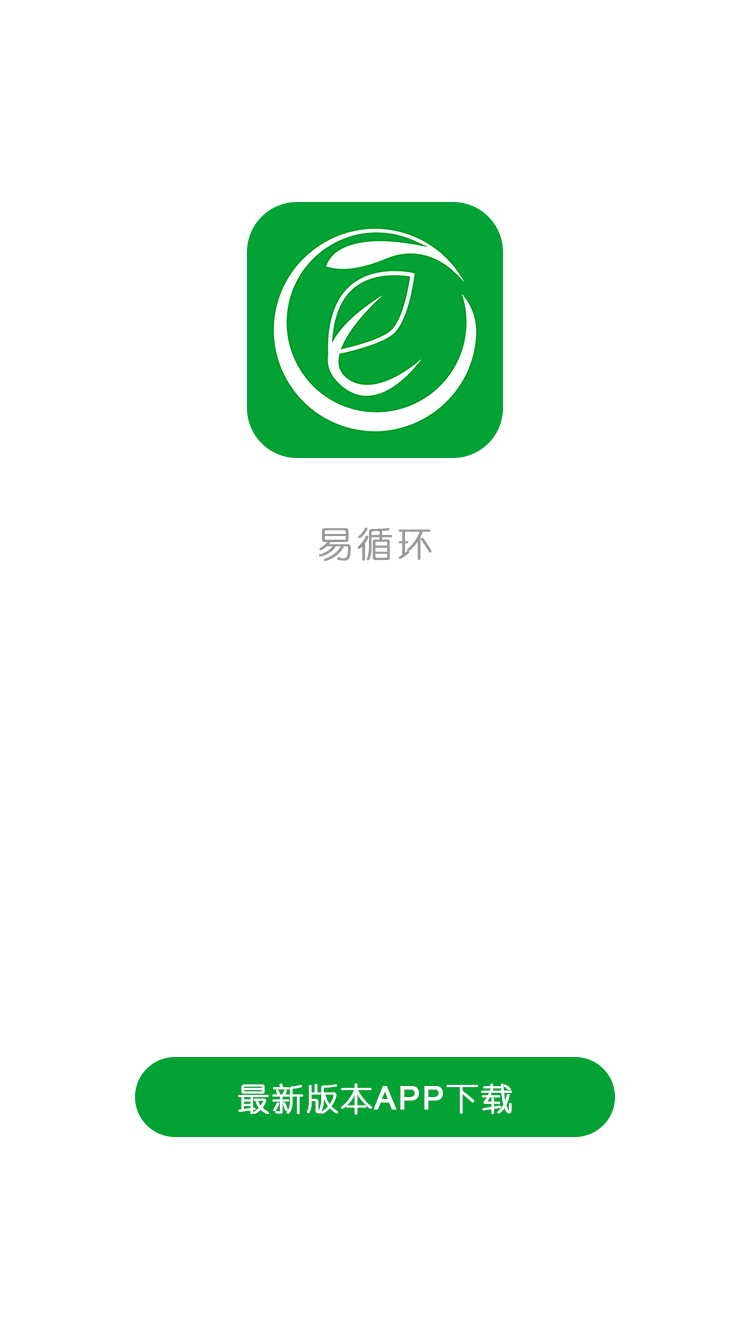
<style>
.page{position:relative;width:750px;height:1335px;background:#ffffff}
.page>*{position:absolute;margin:0}
.t1{font:35.4px "YouYuan";letter-spacing:0.1em;color:#999999;font-weight:bold}
.t2{font:32px "YouYuan";letter-spacing:0.05em;color:#ffffff;font-weight:bold}
.t3{font:32px "ArialMT";letter-spacing:0.05em;color:#ffffff;font-weight:bold}
</style>
<div class="page">
<p class="t1" style="left:318px;top:527px;width:114px;height:35px">易循环</p>
<p class="t2" style="left:238px;top:1083px;width:274px;height:32px">最新版本<span class="t3">APP</span>下载</p>
</div>
